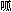
<style>
.page{position:relative;width:12px;height:12px;background:#ffffff}
.page>*{position:absolute;margin:0}
.t1{font:12px "AdobeHeitiStd-Regular";color:#000000}
</style>
<div class="page">
<p class="t1" style="left:1px;top:0px;width:10px;height:11px">呱</p>
</div>
